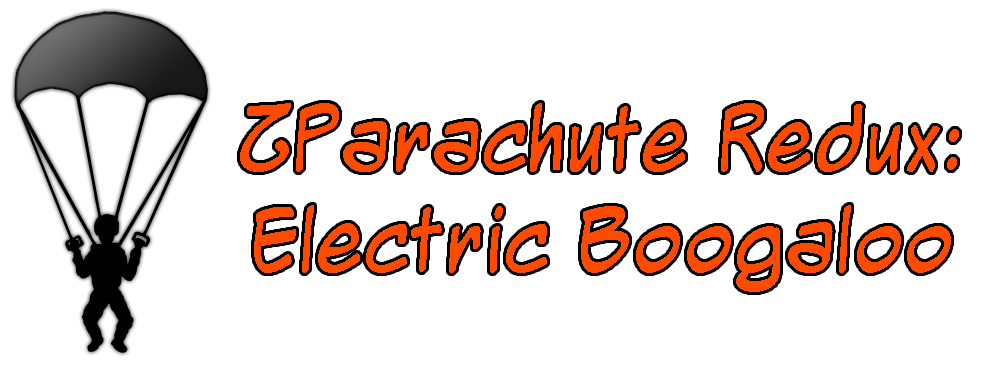
<style>
.page{position:relative;width:1000px;height:365px;background:#ffffff}
.page>*{position:absolute;margin:0}
.t1{font:84px "MightyZeo20";color:#ff4b00}
</style>
<div class="page">
<p class="t1" style="left:240px;top:103px;width:719px;height:189px;text-align:center">ZParachute Redux:<br>Electric Boogaloo</p>
</div>
